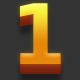
<style>
.page{position:relative;width:80px;height:80px;background:#333333}
.page>*{position:absolute;margin:0}
.t1{font:83.3px "Gilam-BlackDEMO";letter-spacing:-0.005em;scale:0.95 1}
</style>
<div class="page">
<p class="t1" style="left:19px;top:3px;width:42px;height:61px">1</p>
</div>
